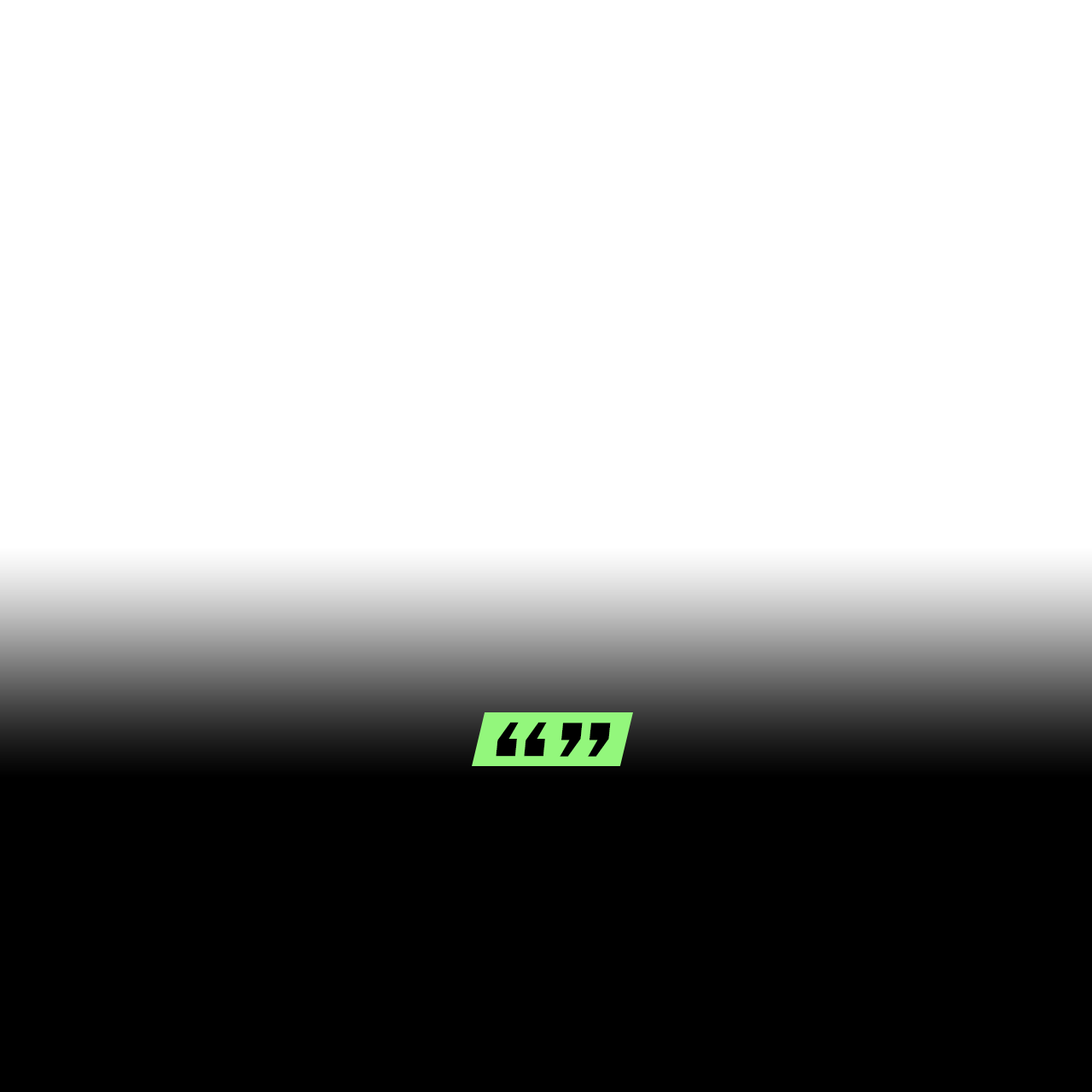
<style>
.page{position:relative;width:1092px;height:1092px;background:#ffffff}
.page>*{position:absolute;margin:0}
.t1{font:97px "FranklinGothic-Heavy";color:#000000;scale:1.05 1}
</style>
<div class="page">
<p class="t1" style="left:496px;top:722px;width:51px;height:35px;rotate:180deg">,,</p>
<p class="t1" style="left:560px;top:723px;width:51px;height:34px">,,</p>
</div>
